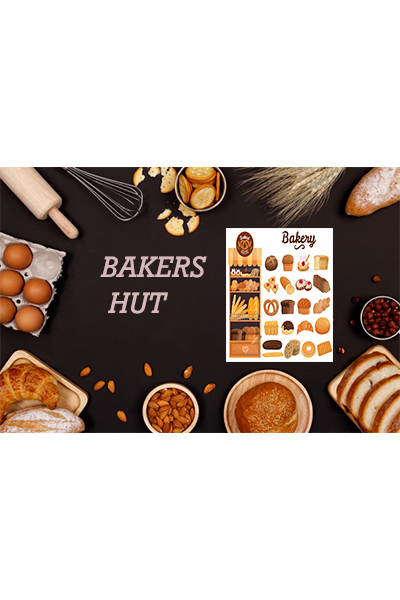
<style>
.page{position:relative;width:400px;height:600px;background:#ffffff}
.page>*{position:absolute;margin:0}
.t1{font:30px "Rockwell-Italic";color:#d5b9b9;text-transform:uppercase}
</style>
<div class="page">
<p class="t1" style="left:100px;top:256px;width:107px;height:58px">bakers <br> hut</p>
</div>
